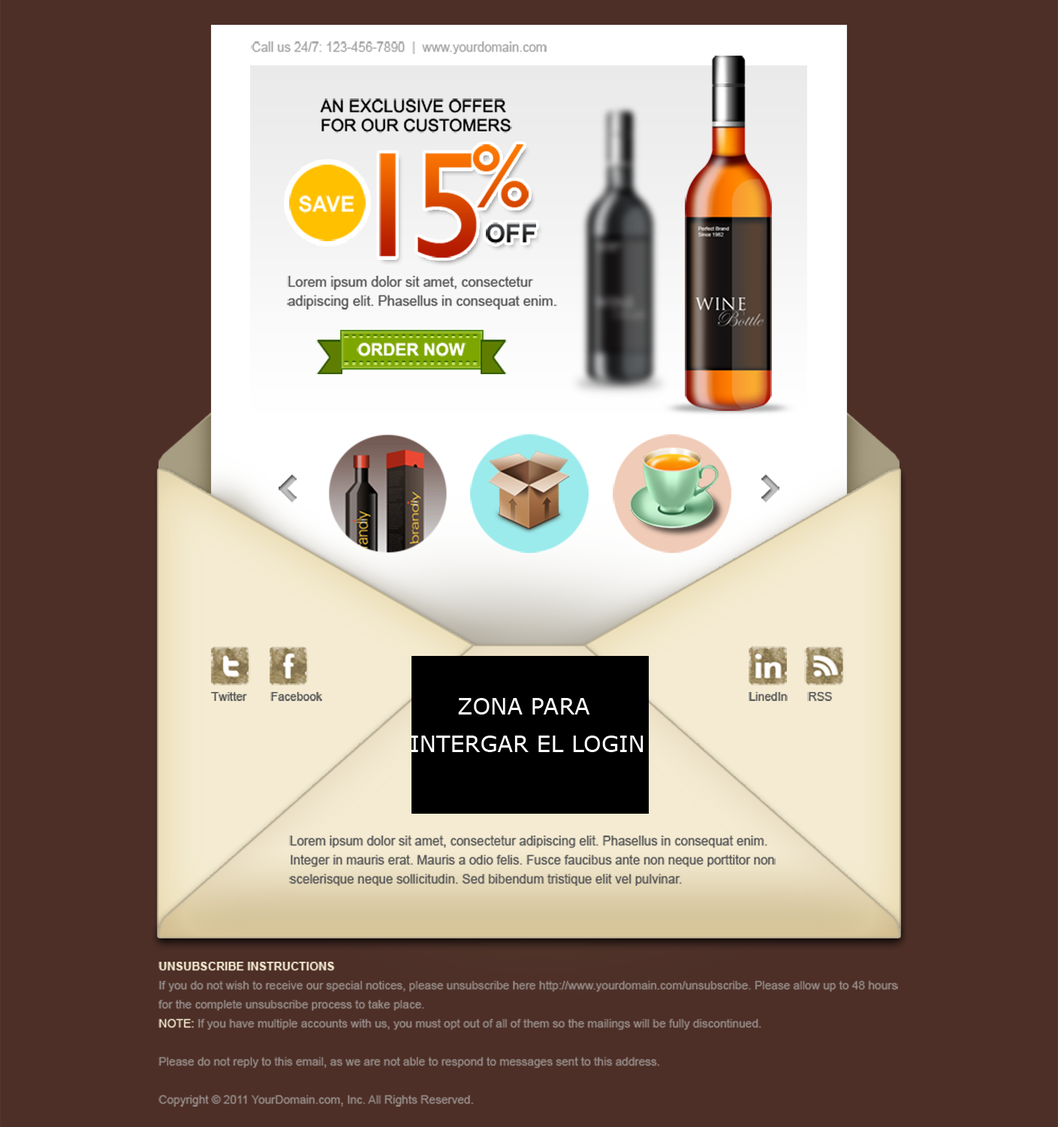
<style>
.page{position:relative;width:1058px;height:1127px;background:#4d2f27}
.page>*{position:absolute;margin:0}
.t1{font:12.7px "ArialMT";color:#a5a5a5}
.t2{font:16.9px/19px "ArialMT";color:#000000;text-transform:uppercase}
.t3{font:150.2px "GillSansMT";letter-spacing:-0.1em}
.t4{font:21.2px "Arial-BoldMT";color:#ffffff;text-transform:uppercase}
.t5{font:25.4px "Arial-BoldMT";text-transform:uppercase}
.t6{font:13.8px/19px "ArialMT";color:#545455}
.t7{font:11.6px "ArialMT";color:#c1df64}
.t8{font:16.9px "Arial-BoldMT";color:#ffffff;text-transform:uppercase}
.t9{font:11.6px "ArialMT";color:#545455}
.t10{font:22.5px/37.6px "Verdana";color:#ffffff}
.t11{font:12.7px/19px "ArialMT";color:#545455}
.t12{font:11.6px/19px "ArialMT";color:#968c89}
.t13{font:11.6px/19px "Arial-BoldMT";color:#f4ebd2}
.t14{font:11.6px/19px "ArialMT";color:#f4ebd2}
</style>
<div class="page">
<p class="t1" style="left:251px;top:41px;width:296px;height:13px">Call us 24/7: 123-456-7890  |  www.yourdomain.com</p>
<p class="t2" style="left:319px;top:98px;width:193px;height:35px">An Exclusive Offer <br>For Our Customers</p>
<p class="t3" style="left:379px;top:144px;width:150px;height:114px">15%</p>
<p class="t4" style="left:298px;top:195px;width:56px;height:18px">Save</p>
<p class="t5" style="left:486px;top:222px;width:50px;height:22px">Off</p>
<p class="t6" style="left:287px;top:276px;width:270px;height:33px">Lorem ipsum dolor sit amet, consectetur adipiscing elit. Phasellus in consequat enim.</p>
<p class="t7" style="left:344px;top:336px;width:134px;height:2px">- - - - - - - - - - - - - - - - - - -</p>
<p class="t8" style="left:357px;top:343px;width:109px;height:14px">Order now</p>
<p class="t7" style="left:344px;top:362px;width:134px;height:3px">- - - - - - - - - - - - - - - - - - -</p>
<p class="t9" style="left:211px;top:692px;width:38px;height:9px">Twitter</p>
<p class="t9" style="left:270px;top:692px;width:52px;height:9px">Facebook</p>
<p class="t10" style="left:412px;top:698px;width:232px;height:54px;text-align:center">ZONA PARA <br>INTERGAR EL LOGIN</p>
<p class="t9" style="left:749px;top:692px;width:39px;height:9px">LinedIn</p>
<p class="t9" style="left:807px;top:692px;width:26px;height:9px">RSS</p>
<p class="t11" style="left:289px;top:835px;width:487px;height:51px">Lorem ipsum dolor sit amet, consectetur adipiscing elit. Phasellus in consequat enim. Integer in mauris erat. Mauris a odio felis. Fusce faucibus ante non neque porttitor non scelerisque neque sollicitudin. Sed bibendum tristique elit vel pulvinar.</p>
<p class="t12" style="left:158px;top:961px;width:740px;height:145px"><span class="t13">UNSUBSCRIBE INSTRUCTIONS<br></span>If you do not wish to receive our special notices, please unsubscribe here http://www.yourdomain.com/unsubscribe. Please allow up to 48 hours for the complete unsubscribe process to take place. <br><span class="t14">NOTE:</span> If you have multiple accounts with us, you must opt out of all of them so the mailings will be fully discontinued.<br><br>Please do not reply to this email, as we are not able to respond to messages sent to this address.<br><br>Copyright © 2011 YourDomain.com, Inc. All Rights Reserved.</p>
</div>
